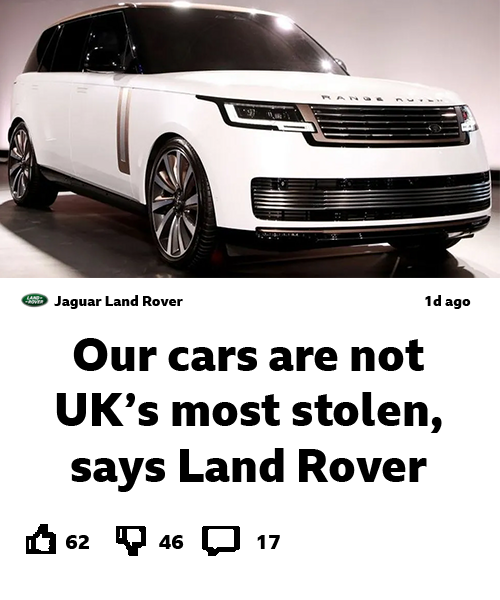
<style>
.page{position:relative;width:500px;height:600px;background:#ffffff}
.page>*{position:absolute;margin:0}
.t1{font:14.3px "BBCReithSans-XBold";color:#000000}
.t2{font:46px "BBCReithSans-XBold";color:#000000}
.t3{font:20px "BBCReithSans-XBold";color:#000000}
</style>
<div class="page">
<p class="t1" style="left:54px;top:295px;width:129px;height:14px">Jaguar Land Rover</p>
<p class="t1" style="left:425px;top:295px;width:46px;height:14px">1d ago</p>
<p class="t2" style="left:56px;top:338px;width:386px;height:154px;text-align:center">Our cars are not UK’s most stolen, says Land Rover</p>
<p class="t3" style="left:66px;top:535px;width:23px;height:14px">62</p>
<p class="t3" style="left:159px;top:535px;width:25px;height:14px">46</p>
<p class="t3" style="left:257px;top:535px;width:23px;height:14px">17</p>
</div>
